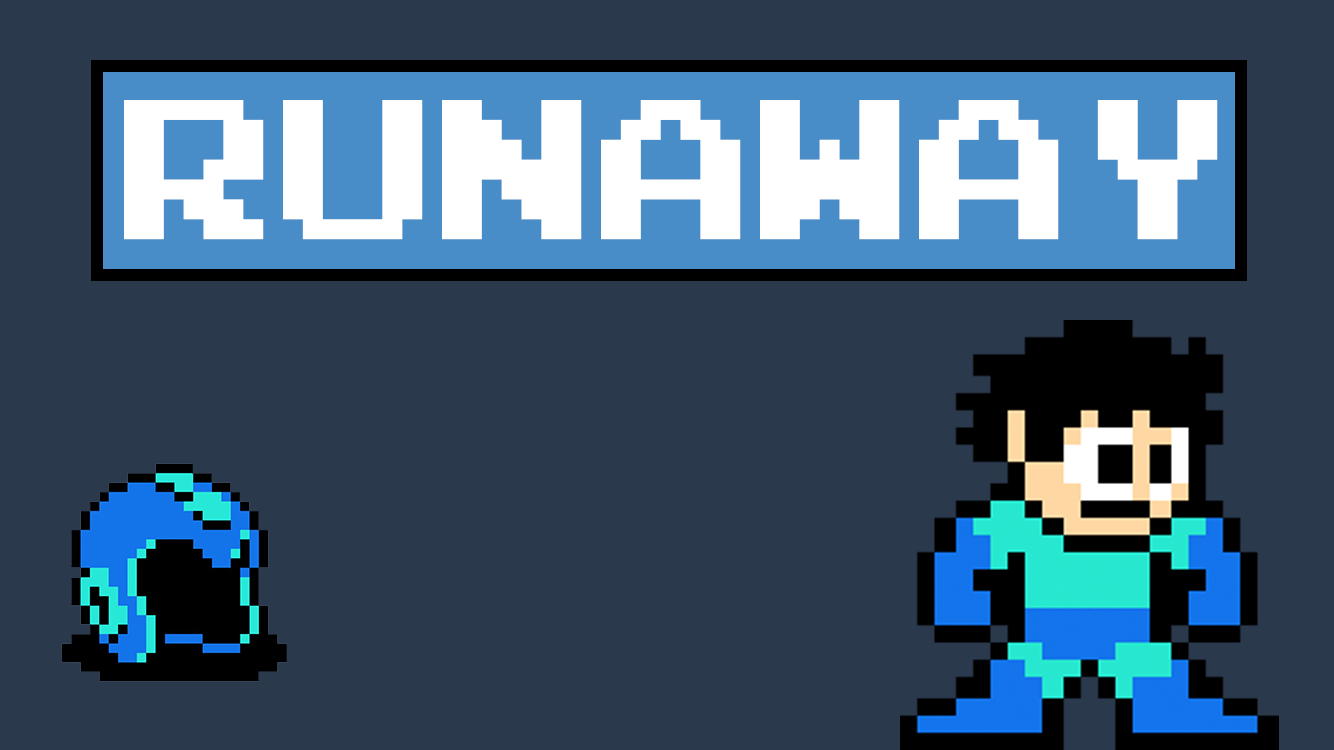
<style>
.page{position:relative;width:1334px;height:750px;background:#2b394d}
.page>*{position:absolute;margin:0}
.t1{font:159px "PressStart2P";color:#ffffff}
</style>
<div class="page">
<p class="t1" style="left:124px;top:100px;width:1094px;height:140px">RUNAWAY</p>
</div>
